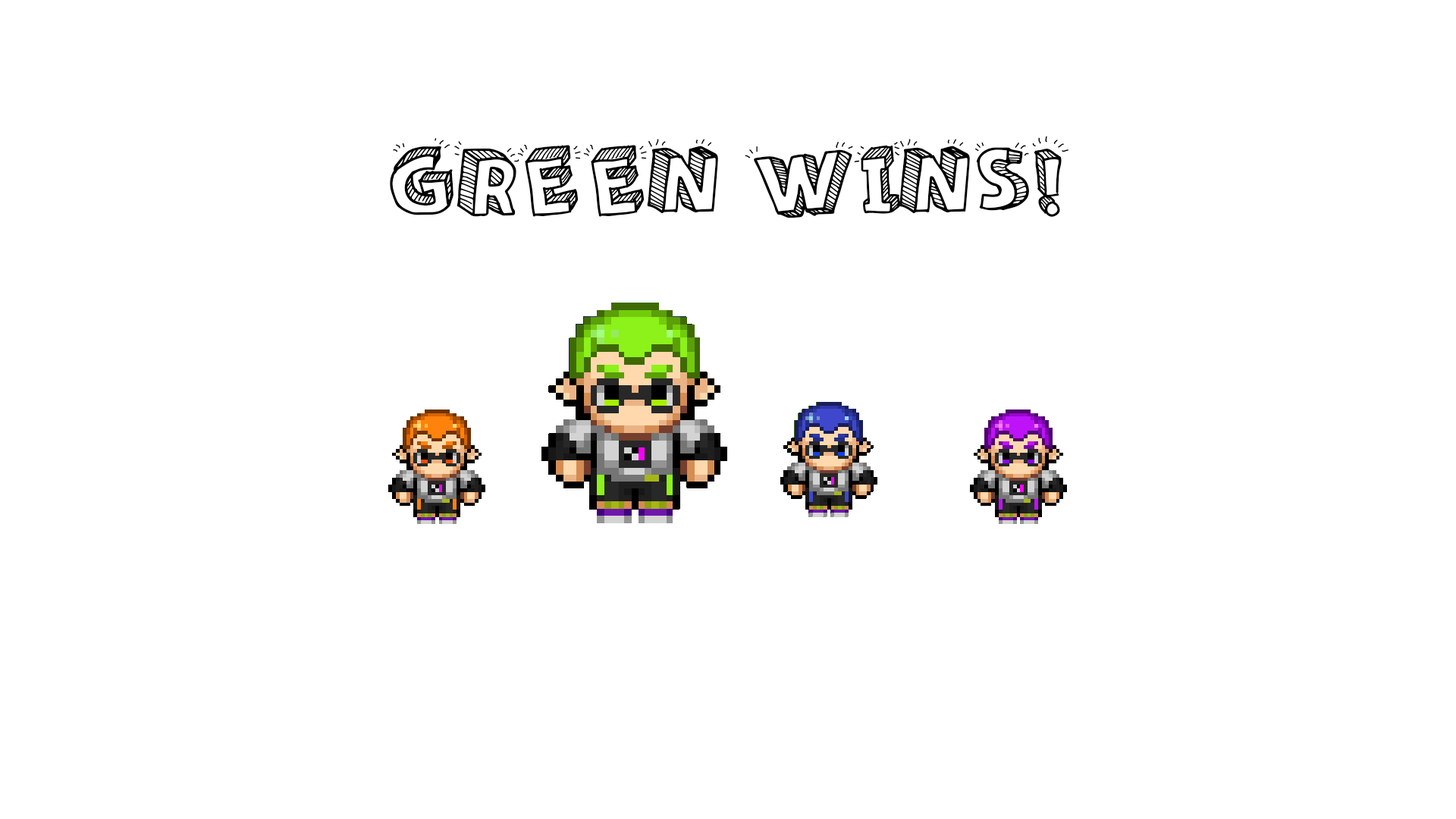
<style>
.page{position:relative;width:1456px;height:819px;background:#ffffff}
.page>*{position:absolute;margin:0}
.t1{font:94.6px "Sketch3D";color:#000000}
</style>
<div class="page">
<p class="t1" style="left:390px;top:136px;width:678px;height:82px">GREEN WINS!</p>
</div>
